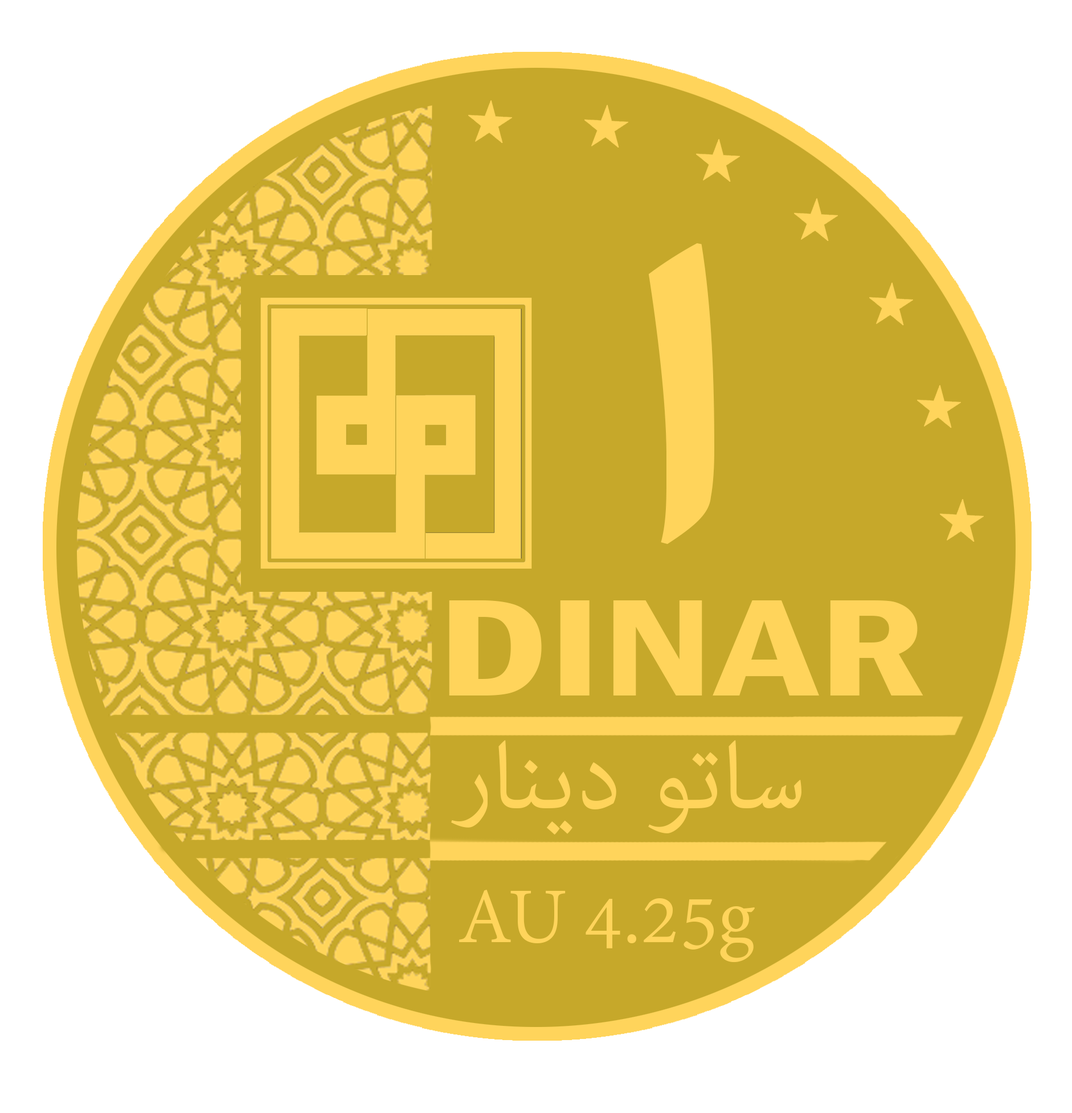
<style>
.page{position:relative;width:1072px;height:1113px;background:#c6a82a}
.page>*{position:absolute;margin:0}
.t1{font:596px "AdobeArabic-Regular";color:#ffd45b;scale:1.69 1}
.t2{font:142.3px "FranklinGothic-DemiCond";color:#ffd45b;scale:1.39 1}
.t3{font:135.2px "AdobeArabic-Regular";color:#ffd45b}
.t4{font:85.4px "AdobeDevanagari-Regular";color:#ffd45b}
</style>
<div class="page">
<p class="t1" style="left:648px;top:243px;width:66px;height:301px">ا</p>
<p class="t2" style="left:449px;top:600px;width:474px;height:95px">DINAR</p>
<p class="t3" style="left:451px;top:740px;width:350px;height:95px">ساتو دينار</p>
<p class="t4" style="left:459px;top:889px;width:296px;height:73px">AU 4.25g</p>
</div>
